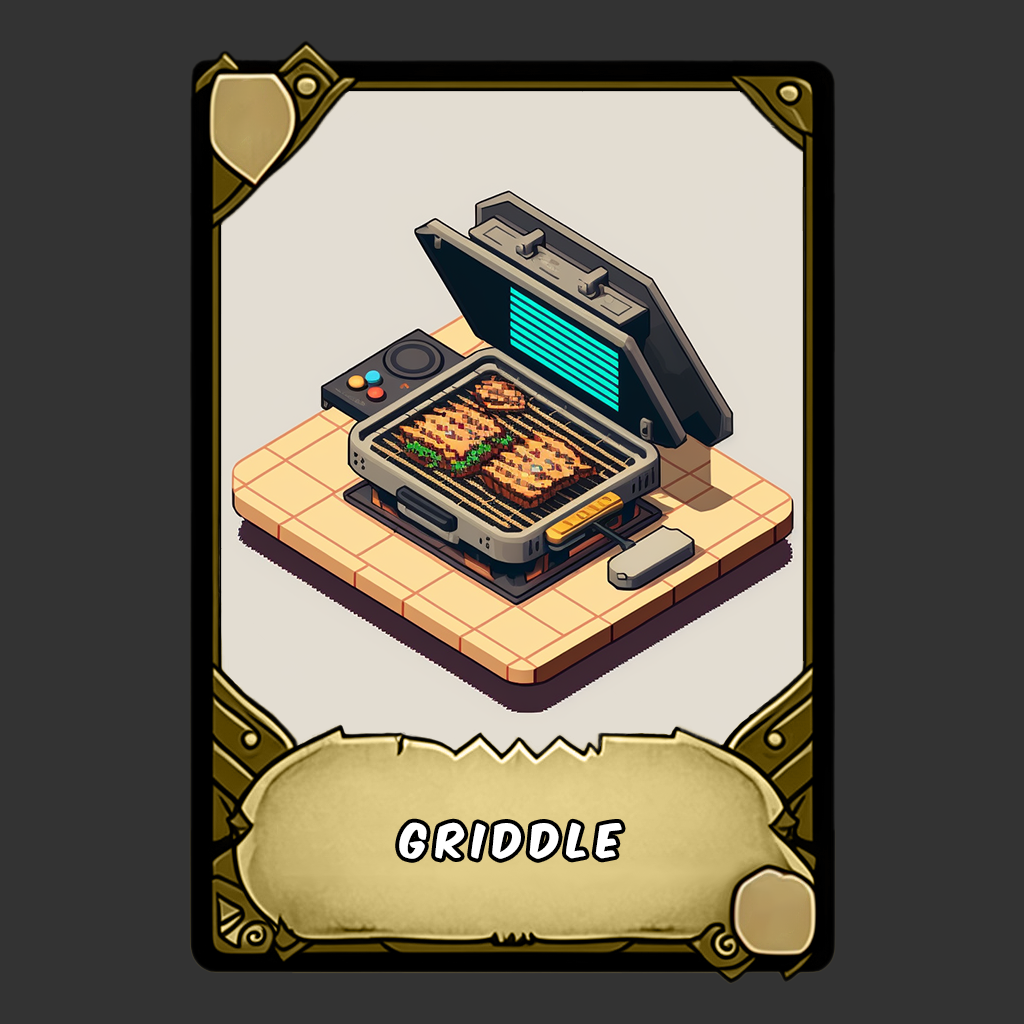
<style>
.page{position:relative;width:1024px;height:1024px;background:#333333}
.page>*{position:absolute;margin:0}
.t1{font:40px "KomikaAxis";letter-spacing:0.2em;color:#ffffff}
</style>
<div class="page">
<p class="t1" style="left:399px;top:822px;width:223px;height:37px">Griddle</p>
</div>
